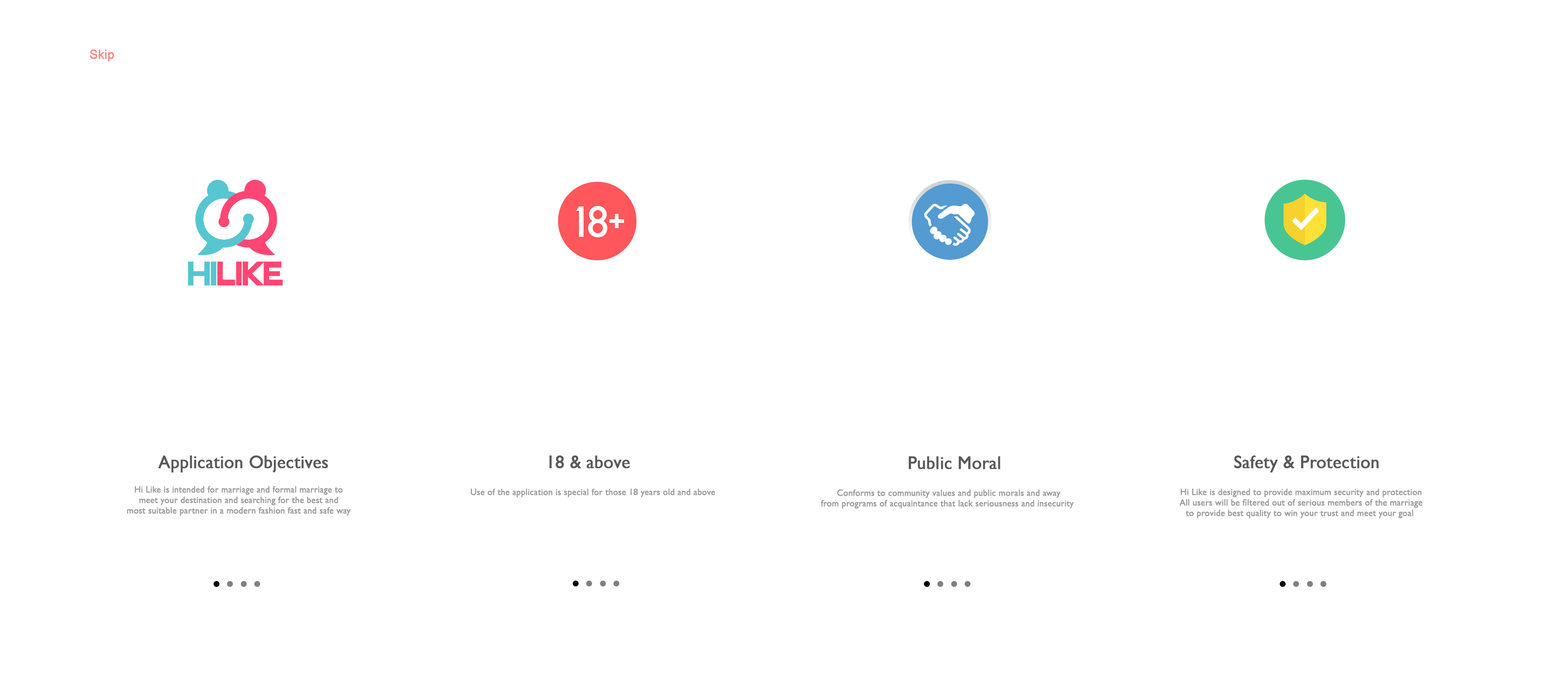
<style>
.page{position:relative;width:1568px;height:691px;background:#ffffff}
.page>*{position:absolute;margin:0}
.t1{font:12.8px "ArialMT";color:#fc8585;font-weight:bold;scale:0.95 1}
.t2{font:36.2px "SFAutomatonCondensed";color:#fe4674}
.t3{font:36.2px "SFAutomatonCondensed";color:#56c6d1}
.t4{font:18.4px "GillSans";color:#595959;font-weight:bold;scale:0.95 1}
.t5{font:9.2px "GillSans";color:#9b9b9b;font-weight:bold;scale:0.95 1}
</style>
<div class="page">
<p class="t1" style="left:90px;top:50px;width:24px;height:12px">Skip</p>
<p class="t2" style="left:188px;top:261px;width:95px;height:24px"><span class="t3">HI</span>LIKE</p>
<p class="t4" style="left:158px;top:455px;width:170px;height:17px">Application Objectives</p>
<p class="t4" style="left:549px;top:455px;width:81px;height:13px">18 &amp; above</p>
<p class="t4" style="left:908px;top:456px;width:92px;height:13px">Public Moral</p>
<p class="t4" style="left:1234px;top:455px;width:145px;height:17px">Safety &amp; Protection</p>
<p class="t5" style="left:127px;top:486px;width:224px;height:30px;text-align:center">Hi Like is intended for marriage and formal marriage to<br>meet your destination and searching for the best and<br>most suitable partner in a modern fashion fast and safe way</p>
<p class="t5" style="left:471px;top:488px;width:244px;height:9px">Use of the application is special for those 18 years old and above</p>
<p class="t5" style="left:821px;top:489px;width:253px;height:20px;text-align:center">Conforms to community values ​​and public morals and away <br>from programs of acquaintance that lack seriousness and insecurity</p>
<p class="t5" style="left:1179px;top:488px;width:243px;height:30px;text-align:center">Hi Like is designed to provide maximum security and protection<br>All users will be filtered out of serious members of the marriage<br> to provide best quality to win your trust and meet your goal</p>
</div>
